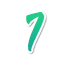
<style>
.page{position:relative;width:64px;height:64px;background:#ffffff}
.page>*{position:absolute;margin:0}
.t1{font:72px "MaroonedOnMarsBB";color:#1dc48c}
</style>
<div class="page">
<p class="t1" style="left:26px;top:12px;width:19px;height:40px">7</p>
</div>
